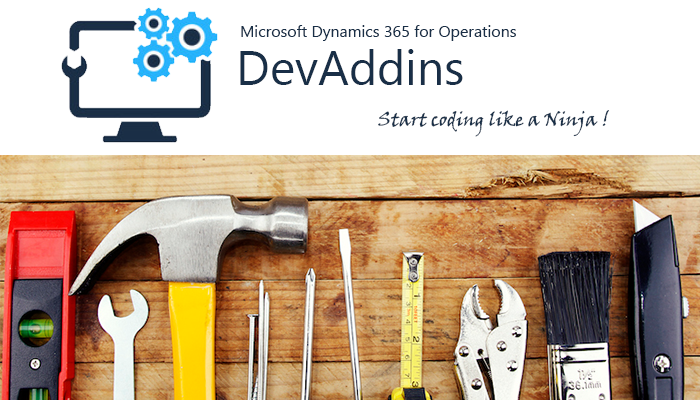
<style>
.page{position:relative;width:700px;height:400px;background:#ffffff}
.page>*{position:absolute;margin:0}
.t1{font:12px "SegoeUI";color:#192f47}
.t2{font:48px "SegoeUI";color:#192f47}
.t3{font:18.7px "VinerHandITC";color:#192f47}
</style>
<div class="page">
<p class="t1" style="left:241px;top:25px;width:275px;height:16px">Microsoft Dynamics 365 for Operations</p>
<p class="t2" style="left:240px;top:49px;width:223px;height:36px">DevAddins</p>
<p class="t3" style="left:378px;top:110px;width:231px;height:27px">Start coding like a Ninja !</p>
</div>
